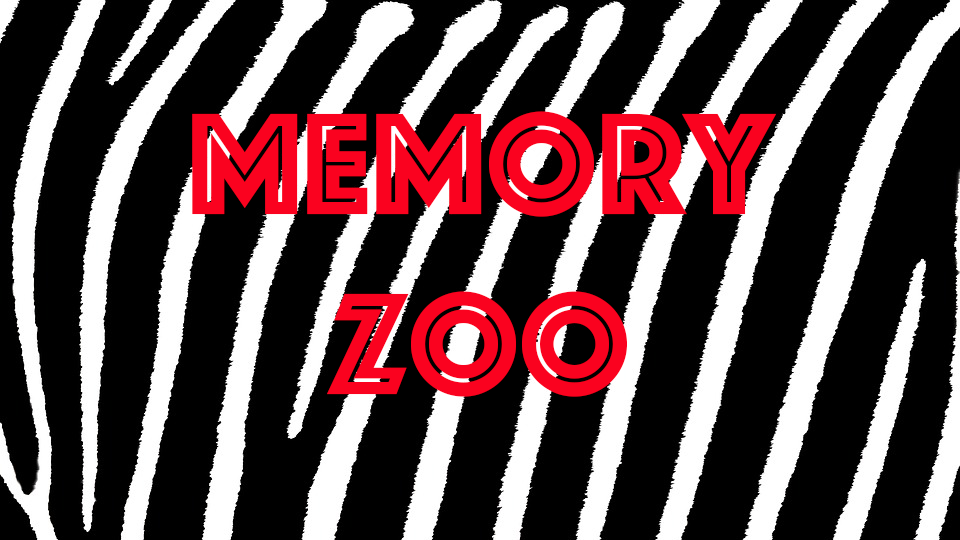
<style>
.page{position:relative;width:960px;height:540px;background:#000000}
.page>*{position:absolute;margin:0}
.t1{font:150px "Phosphate-Inline";color:#fa021f}
</style>
<div class="page">
<p class="t1" style="left:192px;top:111px;width:585px;height:286px;text-align:center">Memory Zoo</p>
</div>
